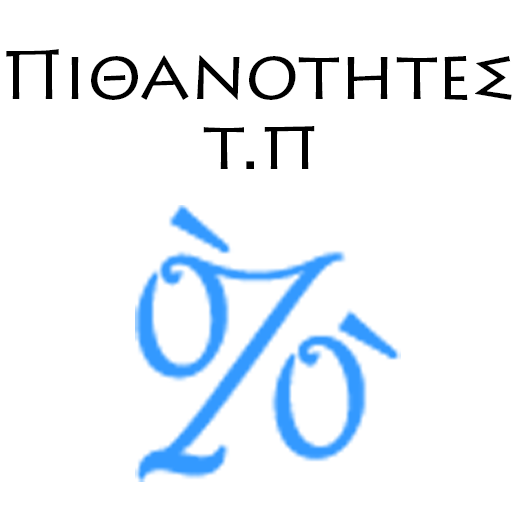
<style>
.page{position:relative;width:512px;height:512px;background:#ffffff}
.page>*{position:absolute;margin:0}
.t1{font:70px "LithosPro-Regular";color:#000000}
</style>
<div class="page">
<p class="t1" style="left:6px;top:49px;width:506px;height:51px">Πιθανοτητεσ</p>
<p class="t1" style="left:203px;top:126px;width:112px;height:43px">τ.π</p>
</div>
